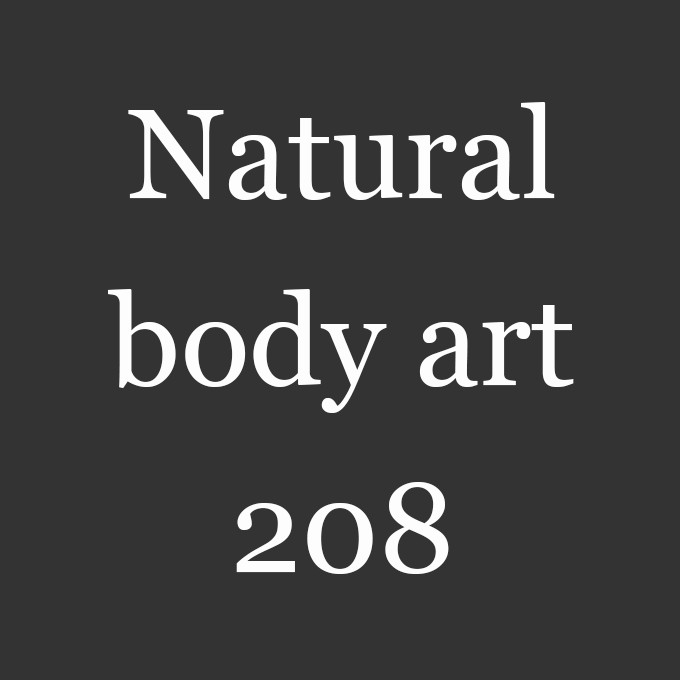
<style>
.page{position:relative;width:680px;height:680px;background:#333333}
.page>*{position:absolute;margin:0}
.t1{font:127px/187px "Georgia";color:#fefefe}
</style>
<div class="page">
<p class="t1" style="left:108px;top:102px;width:466px;height:472px;text-align:center">Natural<br>body art<br>208</p>
</div>
